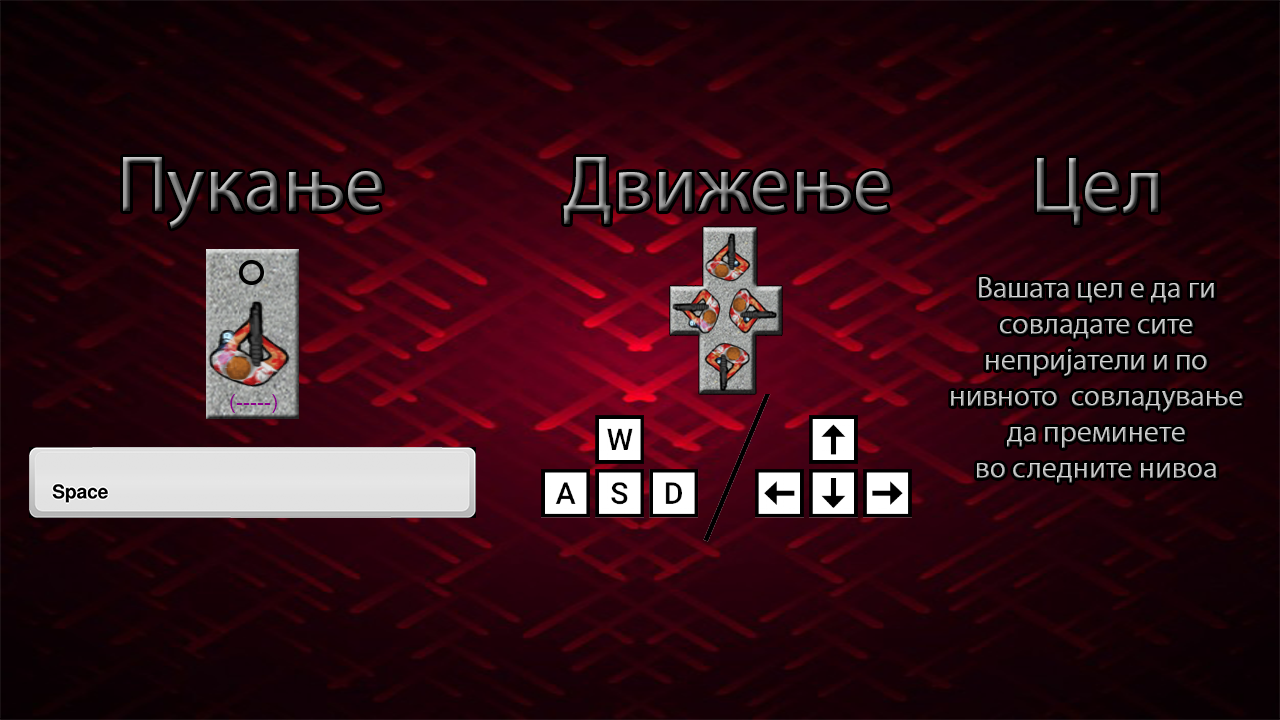
<style>
.page{position:relative;width:1280px;height:720px}
.page>*{position:absolute;margin:0}
.t1{font:80px "MyriadPro-Regular"}
.t2{font:30px "MyriadPro-Regular"}
</style>
<div class="page">
<p class="t1" style="left:123px;top:157px;width:259px;height:72px">Пукање</p>
<p class="t1" style="left:563px;top:157px;width:327px;height:67px">Движење</p>
<p class="t1" style="left:1037px;top:158px;width:121px;height:67px">Цел</p>
<p class="t2" style="left:951px;top:277px;width:292px;height:206px;text-align:center">Вашата цел е да ги <br>совладате сите <br>непријатели и по <br>нивното  совладување <br>да преминете <br>во следните нивоа</p>
</div>
